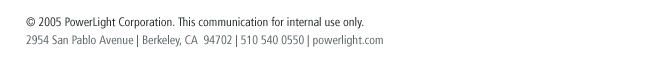
<style>
.page{position:relative;width:650px;height:58px;background:#ffffff}
.page>*{position:absolute;margin:0}
.t1{font:12px/18px "Frutiger-Cn";color:#606669}
.t2{font:12px/18px "Frutiger-Cn";color:#2b3033}
</style>
<div class="page">
<p class="t1" style="left:26px;top:16px;width:357px;height:31px"><span class="t2">© 2005 PowerLight Corporation. This communication for internal use only.<br></span>2954 San Pablo Avenue | Berkeley, CA  94702 | 510 540 0550 | powerlight.com</p>
</div>
